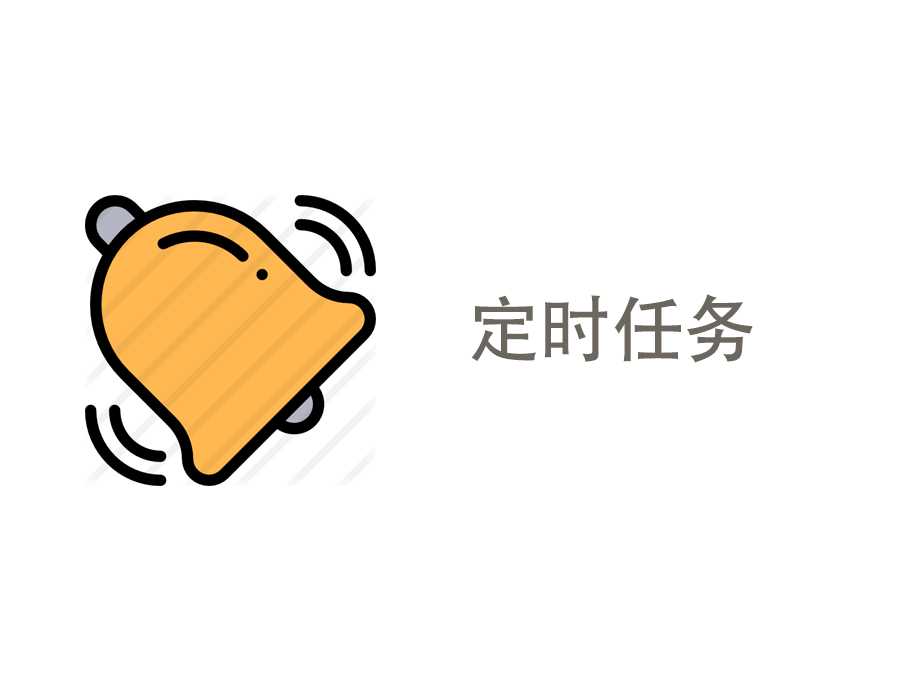
<style>
.page{position:relative;width:920px;height:680px;background:#ffffff}
.page>*{position:absolute;margin:0}
.t1{font:72px "STHeitiSC-Medium";color:#6b675e}
</style>
<div class="page">
<p class="t1" style="left:471px;top:294px;width:282px;height:69px">定时任务</p>
</div>
